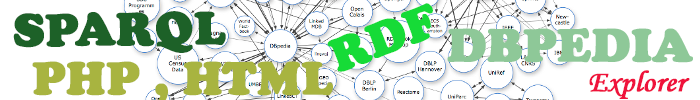
<style>
.page{position:relative;width:700px;height:100px;background:#ffffff}
.page>*{position:absolute;margin:0}
.t1{font:48px "CooperBlack";color:#16db37;font-weight:bold}
.t2{font:48px "CooperBlack";color:#1d6128;font-weight:bold}
.t3{font:48px "CooperBlack";color:#8ec898;font-weight:bold}
.t4{font:30px "MonotypeCorsiva";color:#ef133c;font-weight:bold}
</style>
<div class="page">
<p class="t1" style="left:327px;top:3px;width:106px;height:69px;rotate:-21deg">RDF</p>
<p class="t2" style="left:13px;top:11px;width:213px;height:42px;rotate:-1deg">SPARQL</p>
<p class="t3" style="left:447px;top:28px;width:246px;height:35px">DBPEDIA</p>
<p class="t4" style="left:589px;top:70px;width:101px;height:29px">Explorer</p>
</div>
